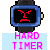
<style>
.page{position:relative;width:50px;height:50px;background:#ffffff}
.page>*{position:absolute;margin:0}
.t1{font:8.3px "Terminal";color:#ff00ff;font-weight:bold}
</style>
<div class="page">
<p class="t1" style="left:12px;top:32px;width:31px;height:18px;text-align:center">HARD TIMER</p>
</div>
